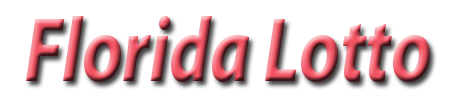
<style>
.page{position:relative;width:450px;height:100px;background:#ffffff}
.page>*{position:absolute;margin:0}
.t1{font:92px "MyriadPro-BoldIt";scale:0.79 1}
</style>
<div class="page">
<p class="t1" style="left:26px;top:16px;width:404px;height:66px">Florida Lotto</p>
</div>
